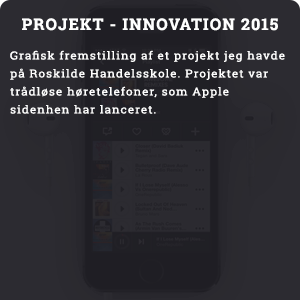
<style>
.page{position:relative;width:300px;height:300px;background:#2c2b31}
.page>*{position:absolute;margin:0}
.t1{font:16px "RobotoSlab-Bold";letter-spacing:0.075em;color:#ffffff}
.t2{font:11.1px/18px "RobotoSlab-Regular";letter-spacing:0.075em;color:#ffffff;scale:1.08 1}
</style>
<div class="page">
<p class="t1" style="left:22px;top:18px;width:256px;height:13px">PROJEKT - INNOVATION 2015</p>
<p class="t2" style="left:10px;top:50px;width:275px;height:64px">Grafisk fremstilling af et projekt jeg havde på Roskilde Handelsskole. Projektet var trådløse høretelefoner, som Apple sidenhen har lanceret.</p>
</div>
